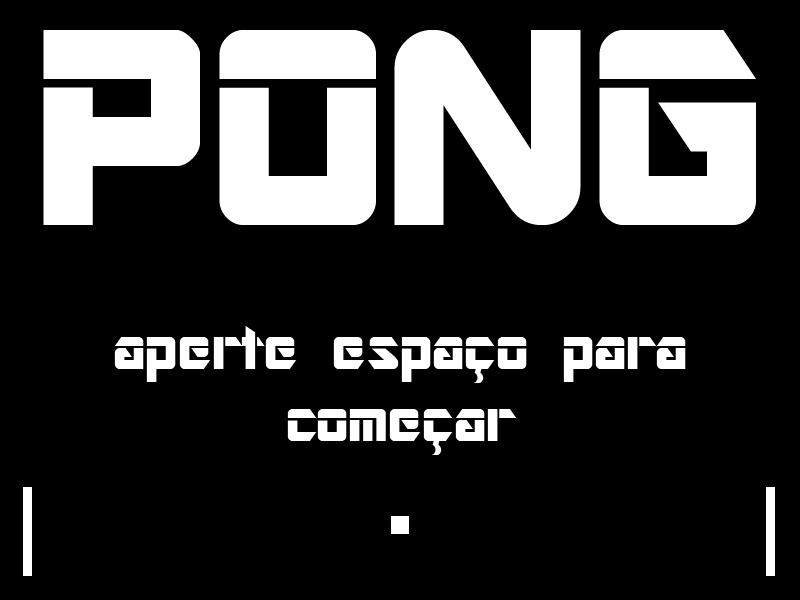
<style>
.page{position:relative;width:800px;height:600px;background:#000000}
.page>*{position:absolute;margin:0}
.t1{font:310px "ARDESTINE";color:#ffffff}
.t2{font:60px "ARDESTINE";color:#ffffff}
</style>
<div class="page">
<p class="t1" style="left:43px;top:30px;width:713px;height:195px">PONG</p>
<p class="t2" style="left:114px;top:326px;width:572px;height:129px;text-align:center">aperte espaço para começar</p>
</div>
